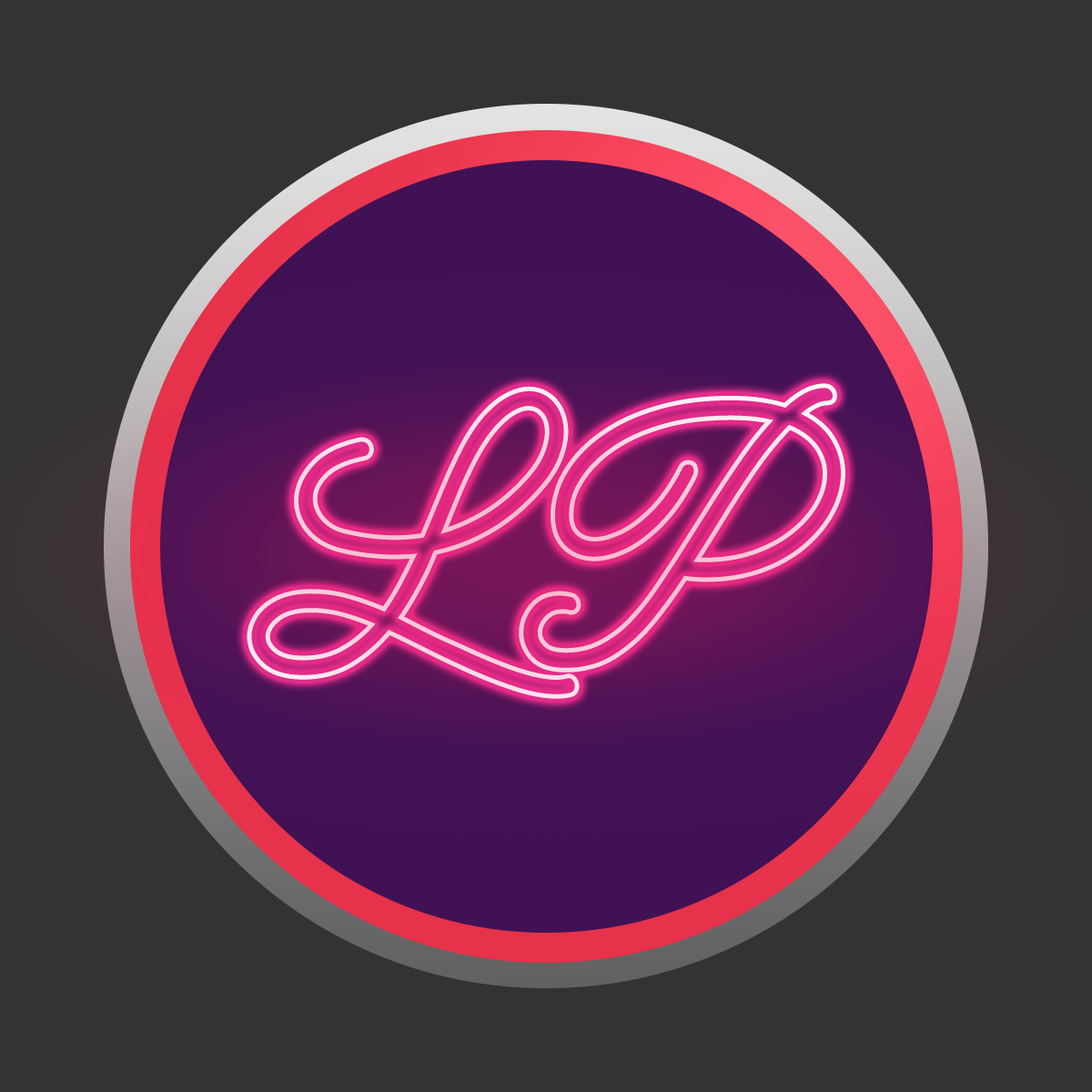
<style>
.page{position:relative;width:1092px;height:1092px;background:#333333}
.page>*{position:absolute;margin:0}
.t1{font:398.7px "MeowScript-Regular";color:#e22881;font-weight:bold;scale:0.89 1}
</style>
<div class="page">
<p class="t1" style="left:251px;top:388px;width:590px;height:306px">LP</p>
</div>
